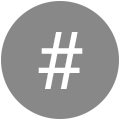
<style>
.page{position:relative;width:120px;height:120px;background:#888888}
.page>*{position:absolute;margin:0}
.t1{font:80px "Roboto-Regular";color:#ffffff}
</style>
<div class="page">
<p class="t1" style="left:38px;top:32px;width:45px;height:57px">#</p>
</div>
